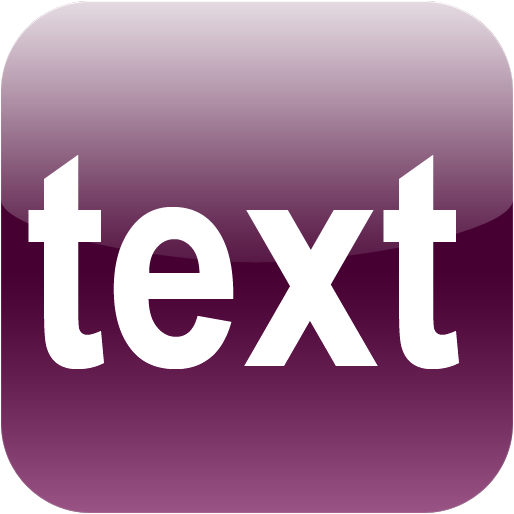
<style>
.page{position:relative;width:514px;height:514px}
.page>*{position:absolute;margin:0}
.t1{font:300px "ArialNarrow-Bold";color:#ffffff}
</style>
<div class="page">
<p class="t1" style="left:28px;top:155px;width:431px;height:214px">text</p>
</div>
